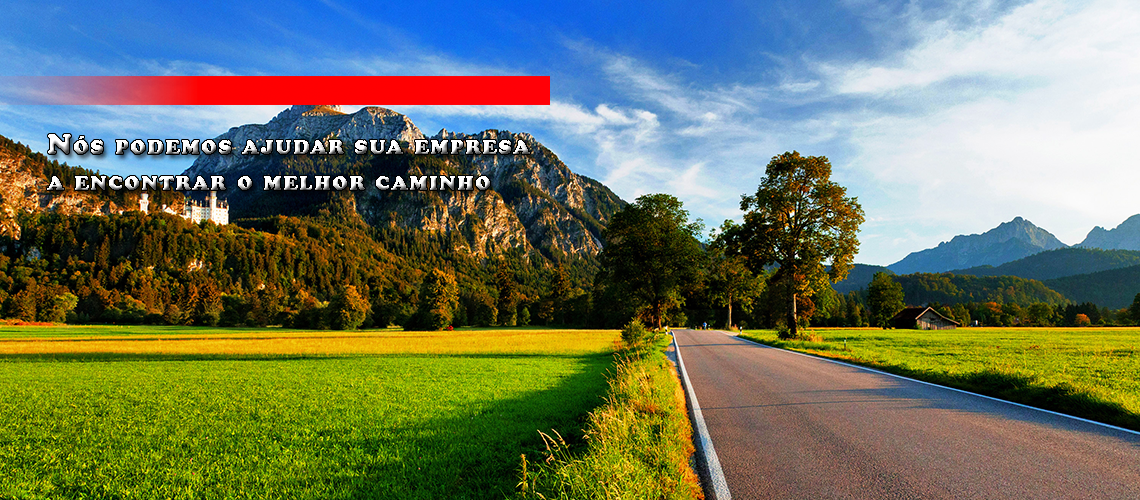
<style>
.page{position:relative;width:1140px;height:500px}
.page>*{position:absolute;margin:0}
.t1{font:30px "CooperBlack";letter-spacing:0.05em;font-variant:small-caps}
</style>
<div class="page">
<p class="t1" style="left:47px;top:134px;width:483px;height:56px">Nós podemos ajudar sua empresa<br>a encontrar o melhor caminho</p>
</div>
